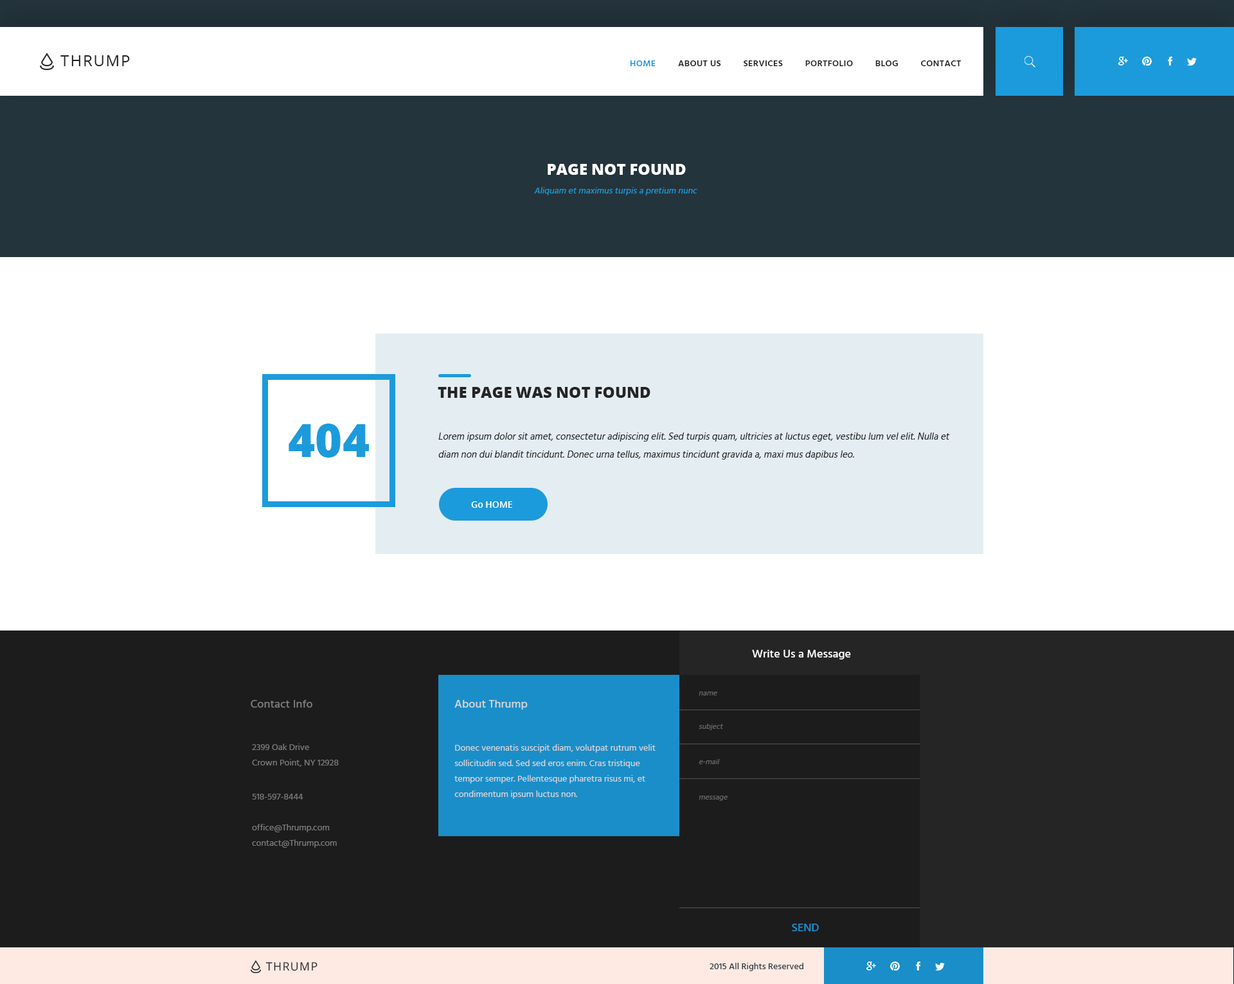
<style>
.page{position:relative;width:1234px;height:984px;background:#ffffff}
.page>*{position:absolute;margin:0}
.t1{font:15.4px "OpenSans";letter-spacing:0.075em;color:#252525;text-transform:uppercase}
.t2{font:9px "Hind-Semibold";letter-spacing:0.025em;color:#252525;text-transform:uppercase}
.t3{font:9px "Hind-Semibold";letter-spacing:0.025em;color:#1c9bdc;text-transform:uppercase}
.t4{font:15.4px "OpenSans-Extrabold";color:#ffffff;text-transform:uppercase}
.t5{font:9px "Hind-Regular";color:#1c9bdc;font-style:italic}
.t6{font:15.4px "OpenSans-Extrabold";color:#252525;text-transform:uppercase}
.t7{font:46.3px "OpenSans-Extrabold";color:#1c9bdc;text-transform:uppercase}
.t8{font:9.6px/18px "Hind-Regular";color:#252525;font-style:italic}
.t9{font:9.6px/17.4px "Hind-Regular";color:#252525;font-style:italic}
.t10{font:9px "OpenSans-Semibold";color:#ffffff;text-transform:uppercase}
.t11{font:9px "OpenSans-Semibold";color:#ffffff}
.t12{font:11.6px "Hind-Medium";color:#ffffff}
.t13{font:11.6px "Hind-Medium";color:#7b7b7b}
.t14{font:11.6px "Hind-Medium";color:#d6d6d6}
.t15{font:7.7px "Hind-Regular";color:#686868;font-style:italic}
.t16{font:9px/15.4px "Hind-Regular";color:#7b7b7b}
.t17{font:9px/15.4px "Hind-Regular";color:#d6d6d6}
.t18{font:9px "Hind-Regular";color:#7b7b7b}
.t19{font:11.6px "Hind-Medium";color:#1a8ec9}
.t20{font:11.4px "OpenSans";letter-spacing:0.075em;color:#252525;text-transform:uppercase}
.t21{font:9px "Hind-Medium";color:#273941}
</style>
<div class="page">
<p class="t1" style="left:60px;top:55px;width:70px;height:11px">Thrump</p>
<p class="t2" style="left:630px;top:60px;width:332px;height:6px"><span class="t3">Home</span>         About Us         Services         Portfolio         Blog         Contact</p>
<p class="t4" style="left:548px;top:164px;width:138px;height:11px">page not found</p>
<p class="t5" style="left:534px;top:187px;width:164px;height:8px">Aliquam et maximus turpis a pretium nunc</p>
<p class="t6" style="left:438px;top:387px;width:213px;height:11px">The page was not found</p>
<p class="t7" style="left:289px;top:424px;width:81px;height:34px">404</p>
<p class="t8" style="left:438px;top:433px;width:512px;height:27px"><span class="t9">L</span>orem ipsum dolor sit amet, consectetur adipiscing elit. Sed turpis quam, ultricies at luctus eget, vestibu lum vel elit. Nulla et diam non dui blandit tincidunt. Donec urna tellus, maximus tincidunt gravida a, maxi mus dapibus leo.</p>
<p class="t10" style="left:471px;top:501px;width:41px;height:7px"><span class="t11">Go </span>Home</p>
<p class="t12" style="left:752px;top:650px;width:99px;height:10px">Write Us a Message</p>
<p class="t13" style="left:251px;top:700px;width:61px;height:8px">Contact Info</p>
<p class="t14" style="left:455px;top:700px;width:73px;height:10px">About Thrump</p>
<p class="t15" style="left:699px;top:692px;width:18px;height:4px">name</p>
<p class="t15" style="left:699px;top:724px;width:24px;height:6px">subject</p>
<p class="t16" style="left:252px;top:744px;width:87px;height:23px">2399 Oak Drive<br>Crown Point, NY 12928</p>
<p class="t17" style="left:455px;top:744px;width:201px;height:55px">Donec venenatis suscipit diam, volutpat rutrum velit sollicitudin sed. Sed sed eros enim. Cras tristique tempor semper. Pellentesque pharetra risus mi, et condimentum ipsum luctus non.</p>
<p class="t15" style="left:699px;top:759px;width:21px;height:5px">e-mail</p>
<p class="t18" style="left:252px;top:794px;width:51px;height:6px">518-597-8444</p>
<p class="t15" style="left:699px;top:796px;width:29px;height:5px">message</p>
<p class="t16" style="left:252px;top:824px;width:85px;height:24px">office@Thrump.com<br>contact@Thrump.com</p>
<p class="t19" style="left:792px;top:924px;width:27px;height:8px">SEND</p>
<p class="t20" style="left:266px;top:962px;width:52px;height:9px">Thrump</p>
<p class="t21" style="left:710px;top:963px;width:94px;height:8px">2015 All Rights Reserved</p>
</div>
